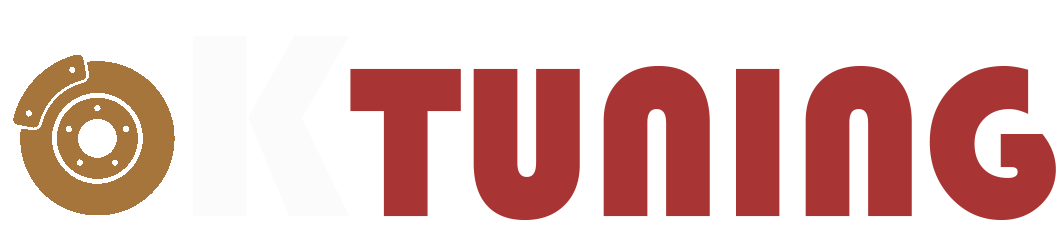
<style>
.page{position:relative;width:1064px;height:235px;background:#ffffff}
.page>*{position:absolute;margin:0}
.t1{font:220px "Bauhaus93";color:#a83533}
.t2{font:270px "Bauhaus93";color:#fcfbfb}
</style>
<div class="page">
<p class="t1" style="left:193px;top:35px;width:863px;height:185px"><span class="t2">K</span>TUNING</p>
</div>
